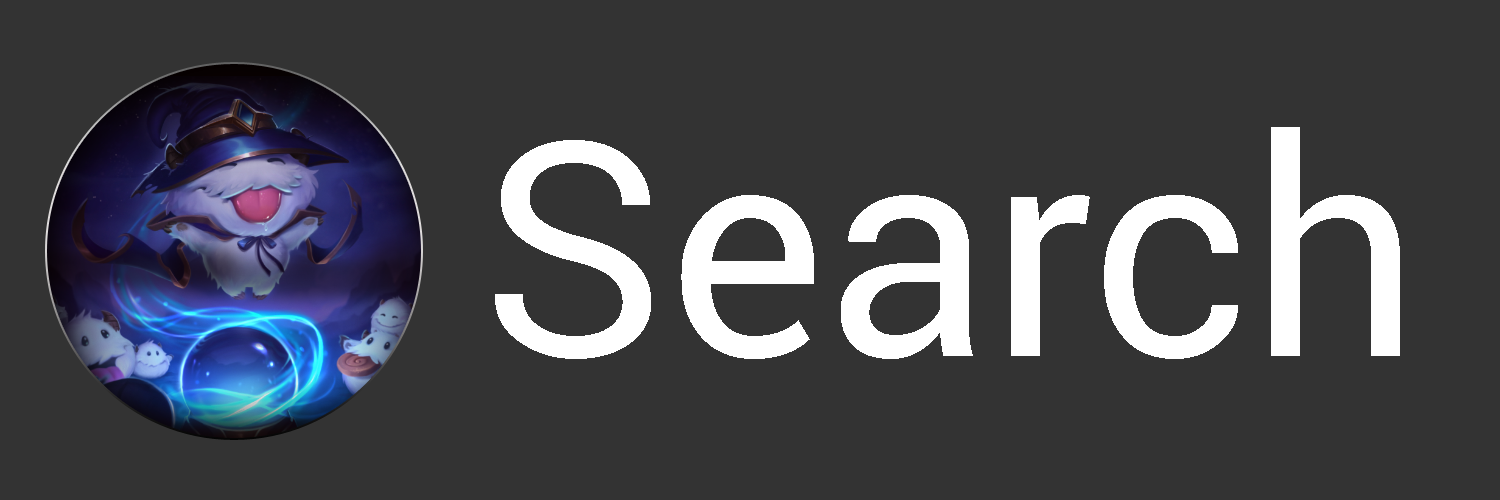
<style>
.page{position:relative;width:1500px;height:500px;background:#333333}
.page>*{position:absolute;margin:0}
.t1{font:300px "Roboto-Regular";color:#fefefe}
</style>
<div class="page">
<p class="t1" style="left:495px;top:127px;width:905px;height:232px">Search</p>
</div>
